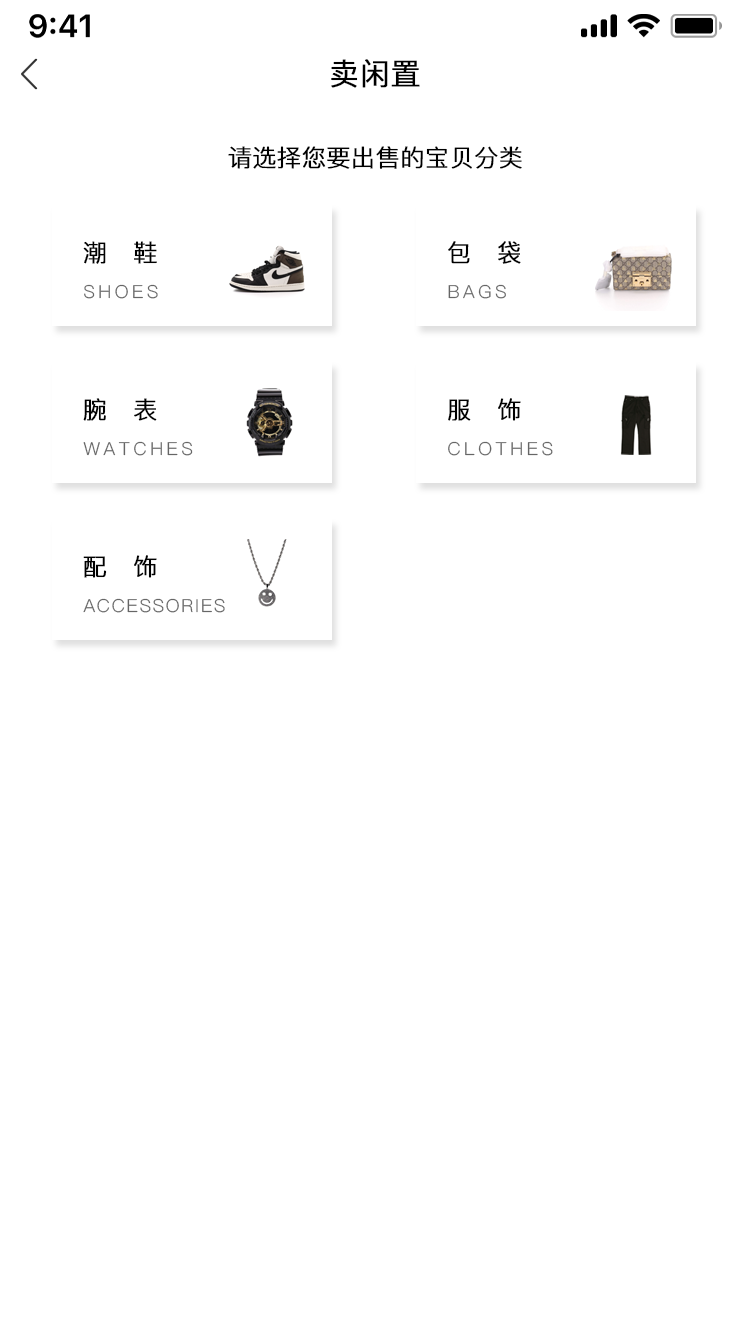
<style>
.page{position:relative;width:750px;height:1334px;background:#ffffff}
.page>*{position:absolute;margin:0}
.t1{font:30px "PingFang-SC-Regular";color:#000000;font-weight:bold}
.t2{font:24px "PingFang-SC-Regular";color:#000000;font-weight:bold}
.t3{font:18px "PingFang-SC-Regular";letter-spacing:0.2em;color:#666666}
.t4{font:18px "PingFang-SC-Regular";letter-spacing:0.1em;color:#666666}
</style>
<div class="page">
<p class="t1" style="left:331px;top:59px;width:89px;height:29px">卖闲置</p>
<p class="t2" style="left:228px;top:146px;width:294px;height:23px">请选择您要出售的宝贝分类</p>
<p class="t2" style="left:83px;top:241px;width:74px;height:23px">潮   鞋</p>
<p class="t2" style="left:448px;top:241px;width:73px;height:23px">包   袋</p>
<p class="t3" style="left:84px;top:284px;width:74px;height:15px">SHOES</p>
<p class="t3" style="left:448px;top:284px;width:58px;height:15px">BAGS</p>
<p class="t2" style="left:83px;top:398px;width:74px;height:23px">腕   表</p>
<p class="t2" style="left:448px;top:398px;width:73px;height:23px">服   饰</p>
<p class="t3" style="left:83px;top:441px;width:110px;height:15px">WATCHES</p>
<p class="t3" style="left:448px;top:441px;width:105px;height:15px">CLOTHES</p>
<p class="t2" style="left:83px;top:555px;width:74px;height:23px">配   饰</p>
<p class="t4" style="left:83px;top:598px;width:142px;height:15px">ACCESSORIES</p>
</div>
